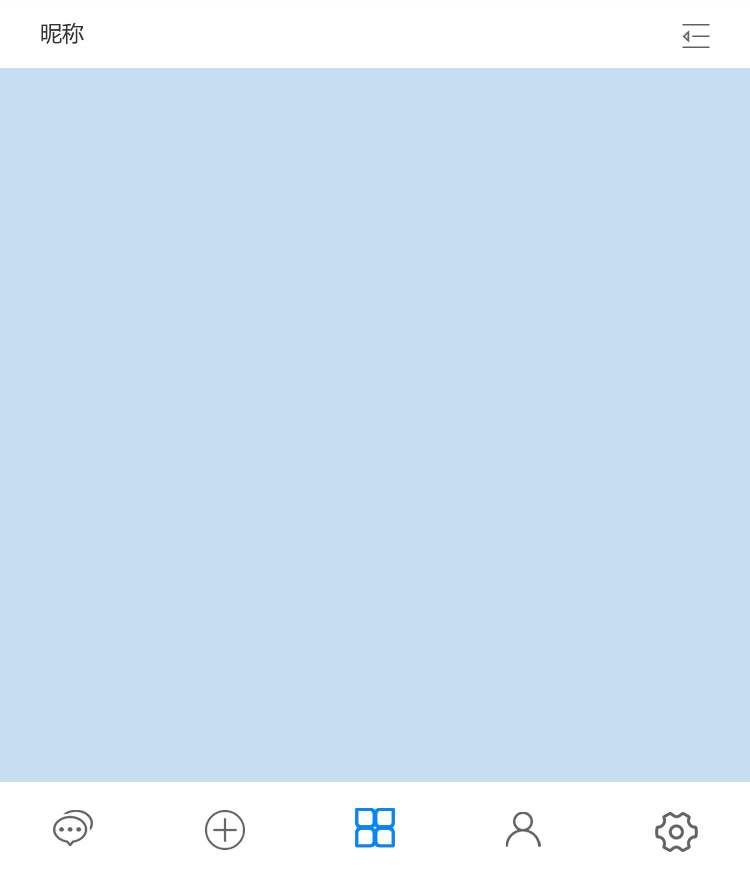
<style>
.page{position:relative;width:750px;height:880px;background:#c7def2}
.page>*{position:absolute;margin:0}
.t1{font:22px "MicrosoftYaHei";color:#323232;text-transform:uppercase}
</style>
<div class="page">
<p class="t1" style="left:41px;top:22px;width:43px;height:22px">昵称</p>
</div>
